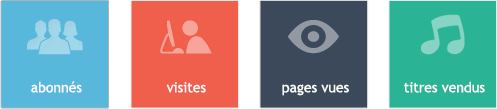
<style>
.page{position:relative;width:497px;height:109px}
.page>*{position:absolute;margin:0}
.t1{font:14px "TrebuchetMS";color:#f9f9f9}
</style>
<div class="page">
<p class="t1" style="left:31px;top:81px;width:51px;height:12px">abonnés</p>
<p class="t1" style="left:166px;top:82px;width:40px;height:11px">visites</p>
<p class="t1" style="left:282px;top:84px;width:67px;height:12px">pages vues</p>
<p class="t1" style="left:404px;top:81px;width:81px;height:12px">titres vendus</p>
</div>
